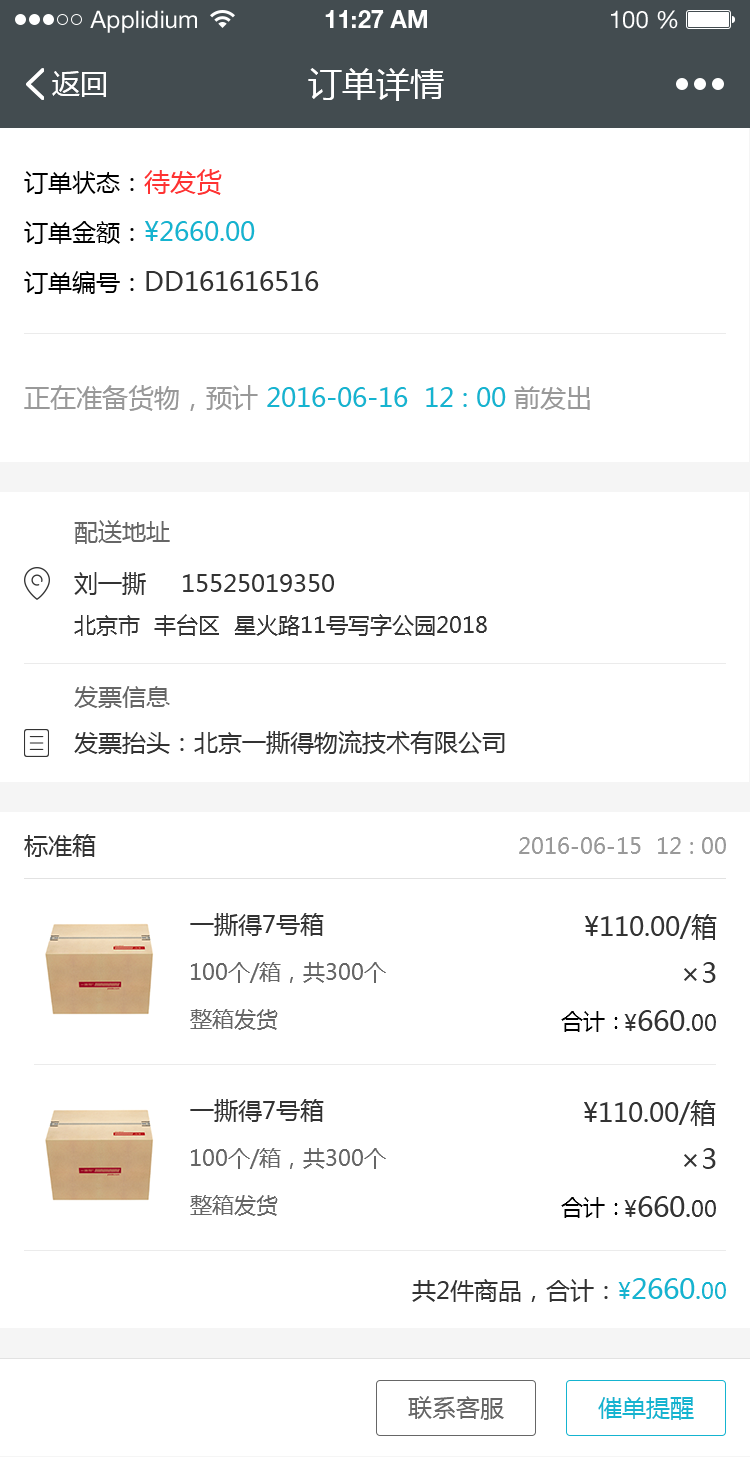
<style>
.page{position:relative;width:750px;height:1457px;background:#ffffff}
.page>*{position:absolute;margin:0}
.t1{font:24px "HelveticaNeueLTStd-Roman";color:#ffffff}
.t2{font:24px "HelveticaNeueLTStd-Bd";color:#ffffff}
.t3{font:28px "MicrosoftYaHei";color:#ffffff}
.t4{font:34px "MicrosoftYaHei";color:#ffffff}
.t5{font:26px/50px "MicrosoftYaHei";color:#333333}
.t6{font:24px/50px "MicrosoftYaHei";color:#000000}
.t7{font:26px/50px "MicrosoftYaHei";color:#fe3333}
.t8{font:26px/50px "MicrosoftYaHei";color:#15b4d0}
.t9{font:26px "MicrosoftYaHei";color:#15b4d0}
.t10{font:26px "MicrosoftYaHei";color:#999999}
.t11{font:24px "MicrosoftYaHei";color:#666666}
.t12{font:24px "MicrosoftYaHei";color:#333333}
.t13{font:22px "MicrosoftYaHei";color:#333333}
.t14{font:22px "MicrosoftYaHei";color:#999999}
.t15{font:26px "MicrosoftYaHei";color:#333333}
.t16{font:22px "MicrosoftYaHei";color:#666666}
.t17{font:28px "MicrosoftYaHei";color:#333333}
.t18{font:22px "MicrosoftYaHei";color:#000000}
.t19{font:22px "MicrosoftYaHei";color:#15b4d0}
.t20{font:28px "MicrosoftYaHei";color:#15b4d0}
.t21{font:24px "MicrosoftYaHei";color:#15b4d0}
</style>
<div class="page">
<p class="t1" style="left:90px;top:10px;width:107px;height:23px">Applidium</p>
<p class="t2" style="left:325px;top:10px;width:102px;height:18px">11:27 AM</p>
<p class="t1" style="left:611px;top:10px;width:67px;height:19px">100 %</p>
<p class="t3" style="left:52px;top:71px;width:54px;height:26px">返回</p>
<p class="t4" style="left:308px;top:68px;width:136px;height:33px">订单详情</p>
<p class="t5" style="left:24px;top:169px;width:295px;height:125px"><span class="t6">订单状态：</span><span class="t7">待发货<br></span><span class="t6">订单金额：</span><span class="t8">¥2660.00<br></span><span class="t6">订单编号：</span>DD161616516</p>
<p class="t9" style="left:24px;top:385px;width:566px;height:26px"><span class="t10">正在准备货物，预计 </span>2016-06-16  12 : 00 <span class="t10">前发出</span></p>
<p class="t11" style="left:74px;top:520px;width:96px;height:24px">配送地址</p>
<p class="t12" style="left:74px;top:572px;width:260px;height:23px">刘一撕     15525019350</p>
<p class="t13" style="left:74px;top:614px;width:413px;height:22px">北京市  丰台区  星火路11号写字公园2018</p>
<p class="t11" style="left:74px;top:686px;width:96px;height:22px">发票信息</p>
<p class="t12" style="left:74px;top:730px;width:431px;height:24px">发票抬头：北京一撕得物流技术有限公司</p>
<p class="t12" style="left:24px;top:834px;width:72px;height:23px">标准箱</p>
<p class="t14" style="left:519px;top:837px;width:207px;height:17px">2016-06-15  12 : 00</p>
<p class="t12" style="left:190px;top:913px;width:134px;height:23px">一撕得7号箱</p>
<p class="t15" style="left:585px;top:914px;width:132px;height:26px">¥110.00/箱</p>
<p class="t16" style="left:191px;top:962px;width:195px;height:21px">100个/箱，共300个</p>
<p class="t17" style="left:684px;top:962px;width:32px;height:21px">×3</p>
<p class="t16" style="left:190px;top:1009px;width:88px;height:21px">整箱发货</p>
<p class="t18" style="left:561px;top:1011px;width:57px;height:21px">合计：</p>
<p class="t17" style="left:624px;top:1010px;width:92px;height:21px"><span class="t13">¥</span>660<span class="t15">.</span><span class="t13">00</span></p>
<p class="t12" style="left:190px;top:1099px;width:134px;height:23px">一撕得7号箱</p>
<p class="t15" style="left:584px;top:1100px;width:132px;height:26px">¥110.00/箱</p>
<p class="t16" style="left:191px;top:1148px;width:195px;height:21px">100个/箱，共300个</p>
<p class="t17" style="left:684px;top:1148px;width:32px;height:21px">×3</p>
<p class="t16" style="left:190px;top:1195px;width:88px;height:21px">整箱发货</p>
<p class="t18" style="left:561px;top:1197px;width:57px;height:21px">合计：</p>
<p class="t17" style="left:624px;top:1196px;width:92px;height:21px"><span class="t13">¥</span>660<span class="t15">.</span><span class="t13">00</span></p>
<p class="t12" style="left:412px;top:1278px;width:314px;height:24px">共2件商品，合计：<span class="t19">¥</span><span class="t20">2660</span><span class="t9">.</span><span class="t19">00</span></p>
<p class="t11" style="left:408px;top:1396px;width:96px;height:24px">联系客服</p>
<p class="t21" style="left:598px;top:1397px;width:96px;height:23px">催单提醒</p>
</div>
